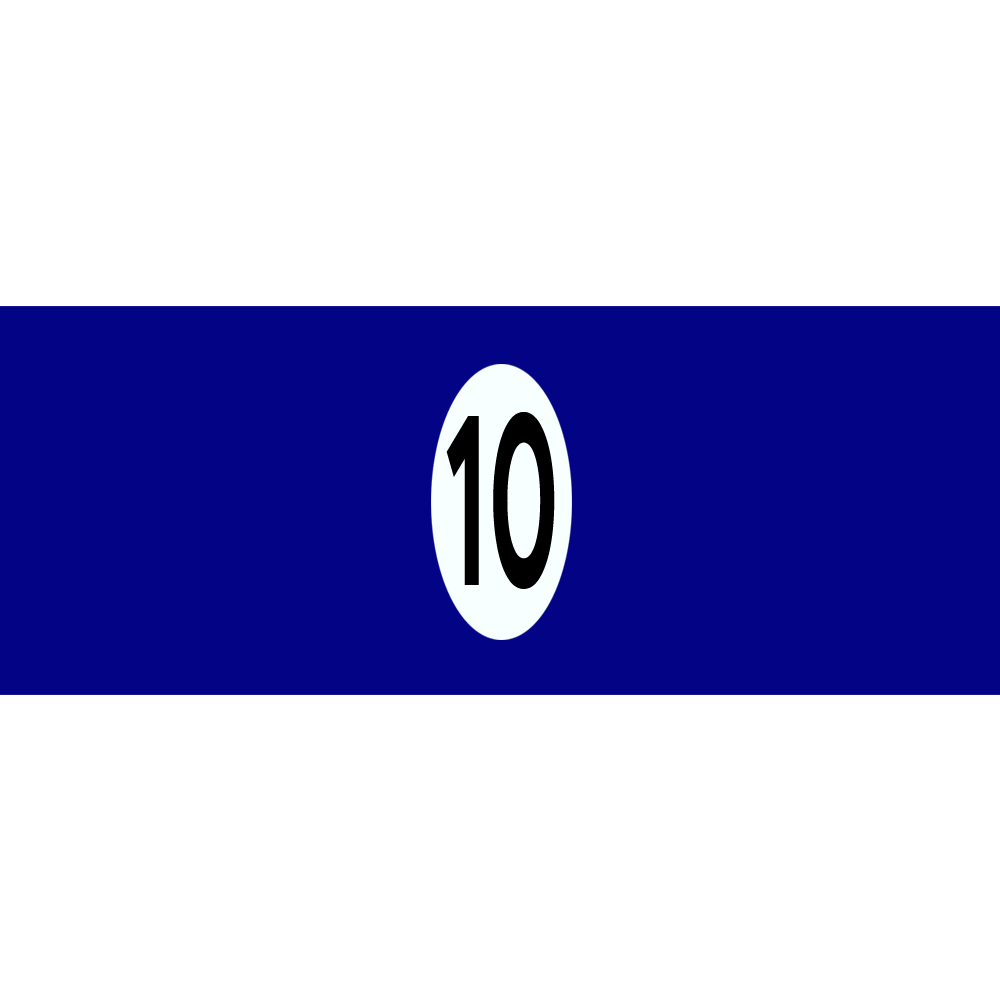
<style>
.page{position:relative;width:1000px;height:1000px;background:#ffffff}
.page>*{position:absolute;margin:0}
.t1{font:246.9px "GoogleSans-Bold";color:#000000;scale:0.43 1}
</style>
<div class="page">
<p class="t1" style="left:446px;top:412px;width:109px;height:177px">10</p>
</div>
